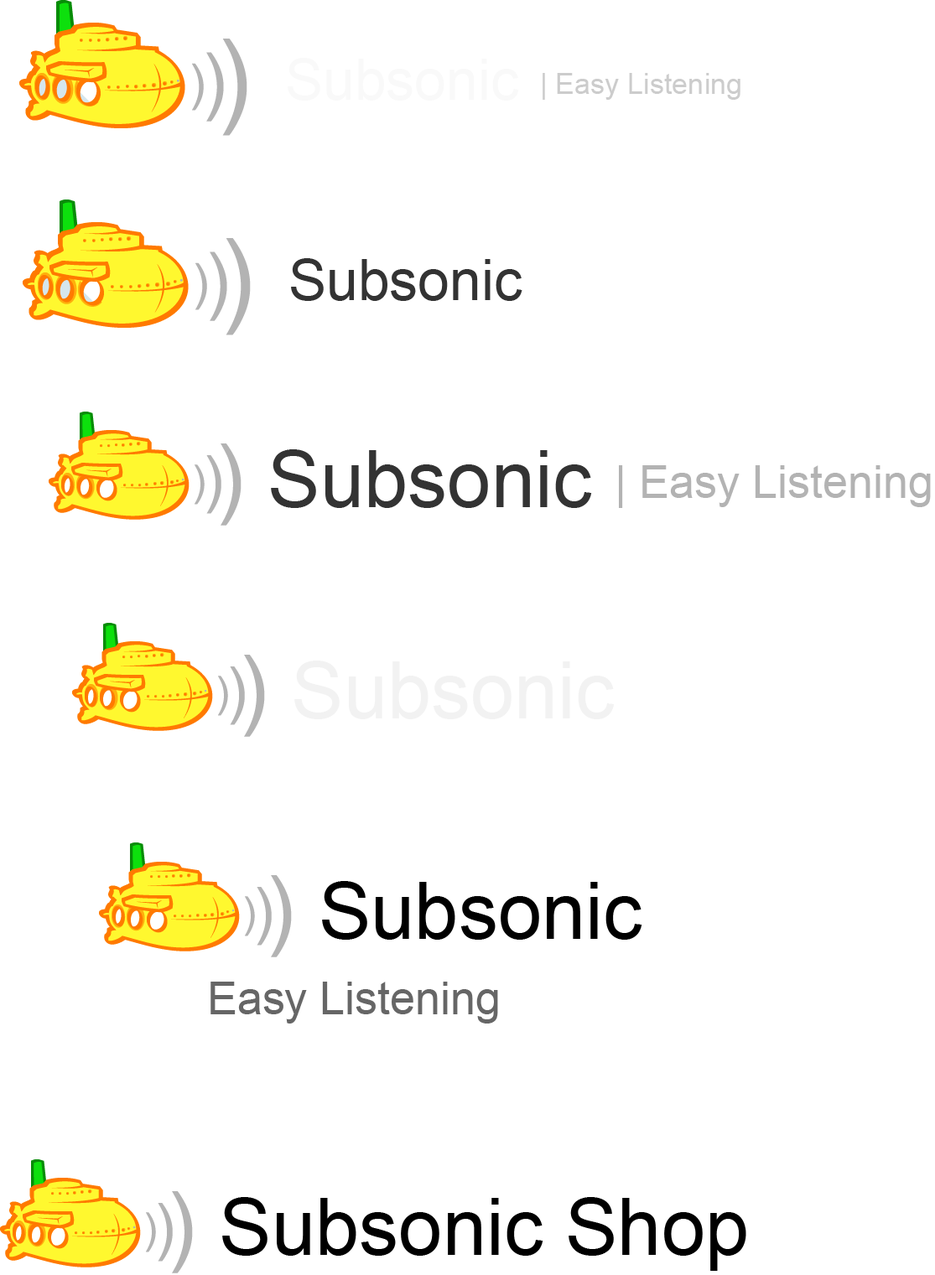
<style>
.page{position:relative;width:935px;height:1275px;background:#ffffff}
.page>*{position:absolute;margin:0}
.t1{font:56.9px "ArialMT";color:#f9f9f9}
.t2{font:28.8px "ArialMT";color:#cccccc}
.t3{font:56.9px "ArialMT";color:#333333}
.t4{font:78.7px "ArialMT";color:#333333}
.t5{font:45.2px "ArialMT";color:#b3b3b3}
.t6{font:78.7px "ArialMT";color:#f2f2f2}
.t7{font:78.7px "ArialMT";color:#000000}
.t8{font:45.2px "ArialMT";color:#666666}
</style>
<div class="page">
<p class="t1" style="left:288px;top:58px;width:231px;height:43px">Subsonic</p>
<p class="t2" style="left:543px;top:73px;width:197px;height:27px">| Easy Listening</p>
<p class="t3" style="left:291px;top:258px;width:231px;height:43px">Subsonic</p>
<p class="t4" style="left:271px;top:449px;width:321px;height:59px">Subsonic</p>
<p class="t5" style="left:619px;top:465px;width:312px;height:43px">| Easy Listening</p>
<p class="t6" style="left:294px;top:661px;width:321px;height:58px">Subsonic</p>
<p class="t7" style="left:322px;top:881px;width:320px;height:59px">Subsonic</p>
<p class="t8" style="left:210px;top:982px;width:288px;height:42px">Easy Listening</p>
<p class="t7" style="left:222px;top:1197px;width:524px;height:74px">Subsonic Shop</p>
</div>
